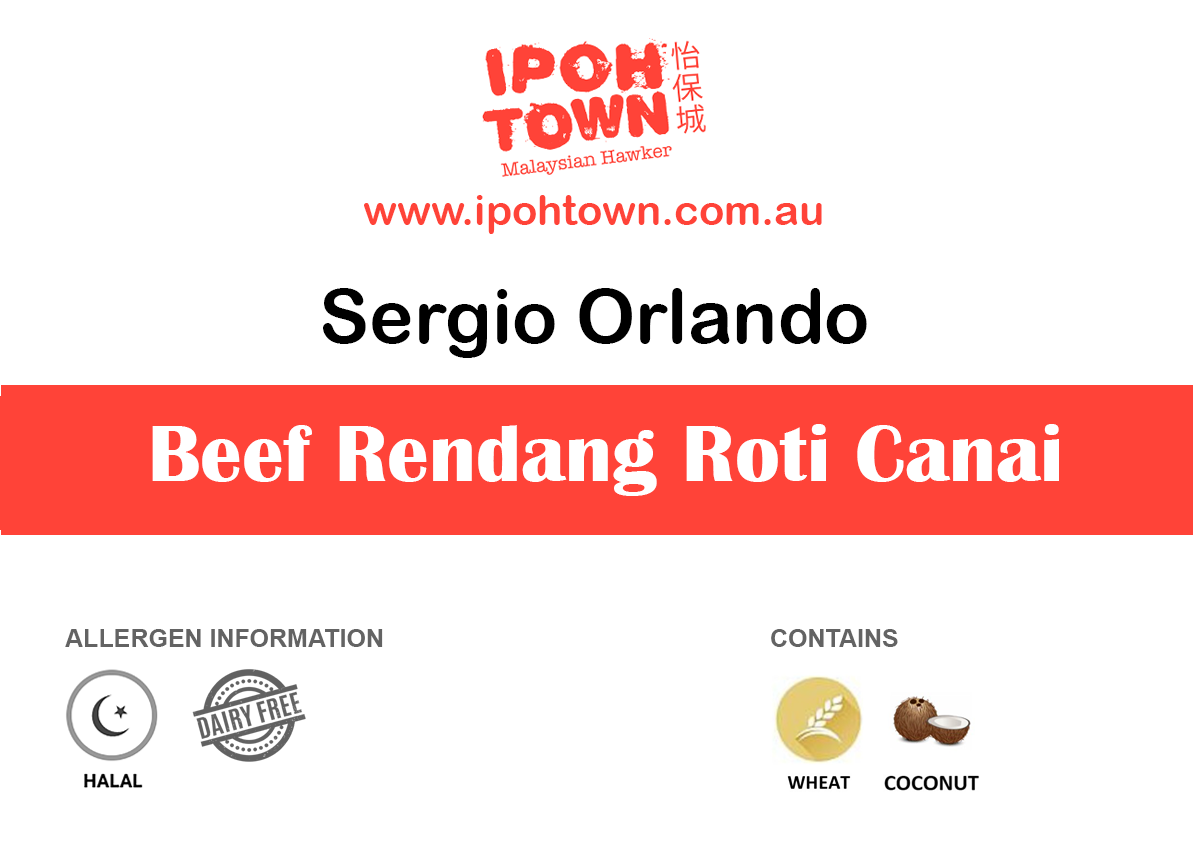
<style>
.page{position:relative;width:1193px;height:850px;background:#ffffff}
.page>*{position:absolute;margin:0}
.t1{font:41.7px "ArialRoundedMTBold";color:#ff4338}
.t2{font:75px "ArialRoundedMTBold";color:#000000}
.t3{font:83.3px "BritannicBold";color:#ffffff}
.t4{font:25px "Arial-BoldMT";color:#636363}
</style>
<div class="page">
<p class="t1" style="left:364px;top:195px;width:458px;height:39px">www.ipohtown.com.au</p>
<p class="t2" style="left:323px;top:288px;width:544px;height:70px">Sergio Orlando</p>
<p class="t3" style="left:152px;top:424px;width:907px;height:72px">Beef Rendang Roti Canai</p>
<p class="t4" style="left:65px;top:629px;width:318px;height:18px">ALLERGEN INFORMATION</p>
<p class="t4" style="left:771px;top:629px;width:127px;height:18px">CONTAINS</p>
</div>
